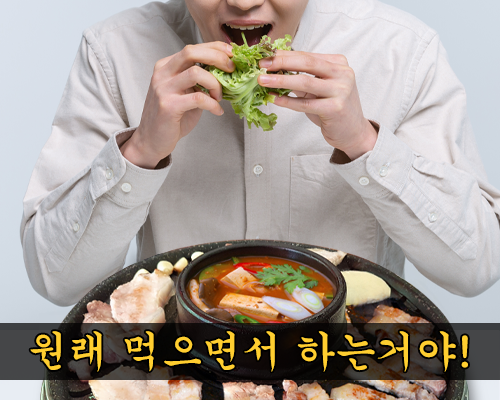
<style>
.page{position:relative;width:500px;height:400px}
.page>*{position:absolute;margin:0}
.t1{font:42.7px "H2gsrB";letter-spacing:-0.05em;color:#ffce30}
</style>
<div class="page">
<p class="t1" style="left:30px;top:331px;width:438px;height:41px">원래 먹으면서 하는거야!</p>
</div>
